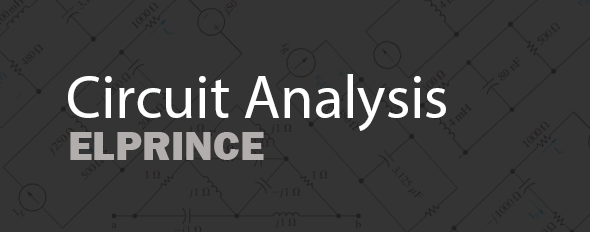
<style>
.page{position:relative;width:590px;height:232px;background:#353434}
.page>*{position:absolute;margin:0}
.t1{font:60.9px "MyriadPro-Regular";color:#ffffff}
.t2{font:42px "FranklinGothic-Heavy";color:#b3aeae}
</style>
<div class="page">
<p class="t1" style="left:68px;top:74px;width:378px;height:57px">Circuit Analysis</p>
<p class="t2" style="left:70px;top:132px;width:194px;height:28px">ELPRINCE</p>
</div>
